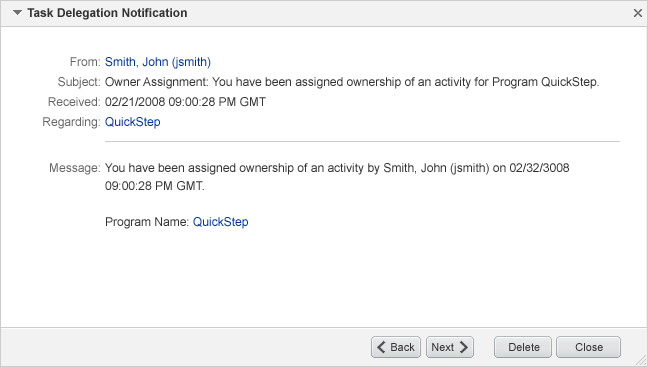
<style>
.page{position:relative;width:648px;height:367px;background:#ffffff}
.page>*{position:absolute;margin:0}
.t1{font:12px "Arial-BoldMT";color:#333333}
.t2{font:12px "ArialMT";color:#666666}
.t3{font:12px "ArialMT";color:#003399}
.t4{font:12px "ArialMT";color:#333333}
.t5{font:12px/18px "ArialMT";color:#333333}
.t6{font:12px/18px "ArialMT";color:#003399}
.t7{font:11px "ArialMT";color:#333333}
</style>
<div class="page">
<p class="t1" style="left:27px;top:8px;width:160px;height:12px">Task Delegation Notification</p>
<p class="t2" style="left:70px;top:57px;width:30px;height:9px">From:</p>
<p class="t3" style="left:105px;top:57px;width:106px;height:12px">Smith, John (jsmith)</p>
<p class="t2" style="left:58px;top:77px;width:42px;height:12px">Subject:</p>
<p class="t4" style="left:105px;top:77px;width:494px;height:12px">Owner Assignment: You have been assigned ownership of an activity for Program QuickStep.</p>
<p class="t2" style="left:48px;top:97px;width:52px;height:9px">Received:</p>
<p class="t4" style="left:105px;top:97px;width:161px;height:10px">02/21/2008 09:00:28 PM GMT</p>
<p class="t2" style="left:43px;top:117px;width:57px;height:12px">Regarding:</p>
<p class="t3" style="left:105px;top:117px;width:55px;height:12px">QuickStep</p>
<p class="t2" style="left:50px;top:163px;width:50px;height:12px">Message:</p>
<p class="t5" style="left:105px;top:163px;width:464px;height:66px">You have been assigned ownership of an activity by Smith, John (jsmith) on 02/32/3008 <br>09:00:28 PM GMT.<br><br>Program Name: <span class="t6">QuickStep</span></p>
<p class="t7" style="left:391px;top:343px;width:24px;height:8px">Back</p>
<p class="t7" style="left:432px;top:343px;width:22px;height:8px">Next</p>
<p class="t7" style="left:509px;top:343px;width:31px;height:8px">Delete</p>
<p class="t7" style="left:575px;top:343px;width:28px;height:8px">Close</p>
</div>
